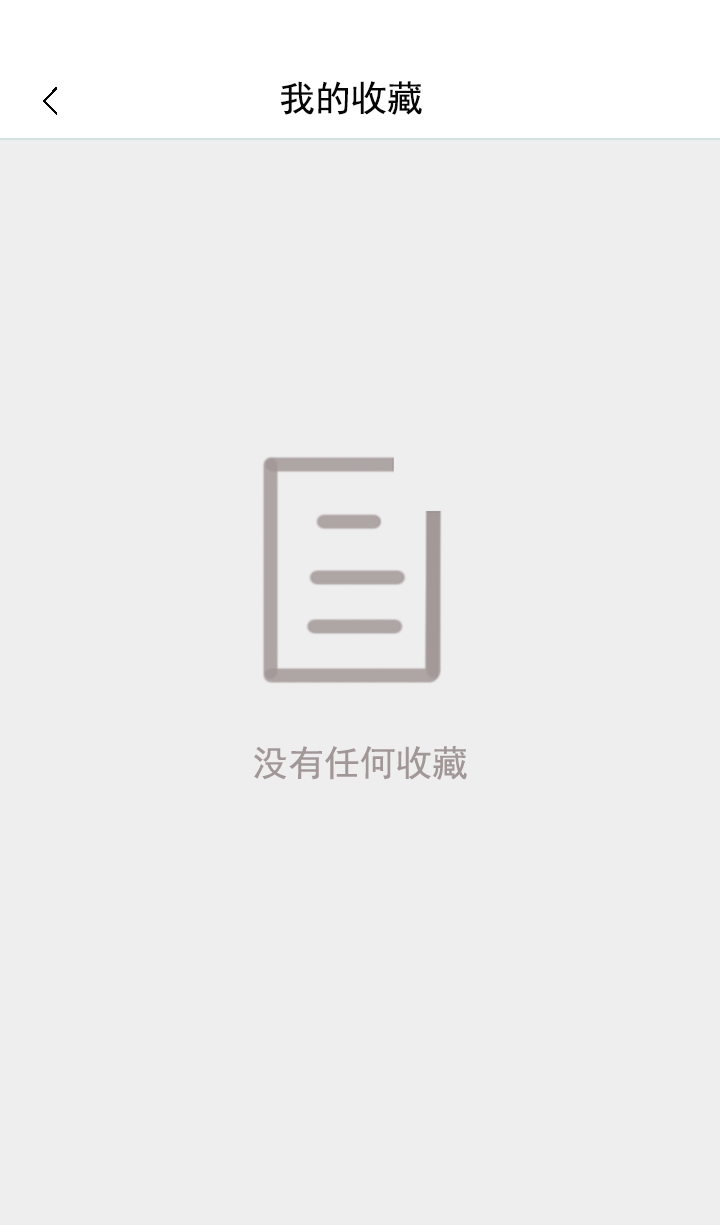
<style>
.page{position:relative;width:720px;height:1225px;background:#eeeeee}
.page>*{position:absolute;margin:0}
.t1{font:36px "SimHei";color:#060606}
.t2{font:36px "SimHei";color:#a29797}
</style>
<div class="page">
<p class="t1" style="left:280px;top:81px;width:142px;height:34px">我的收藏</p>
<p class="t2" style="left:254px;top:746px;width:213px;height:34px">没有任何收藏</p>
</div>
